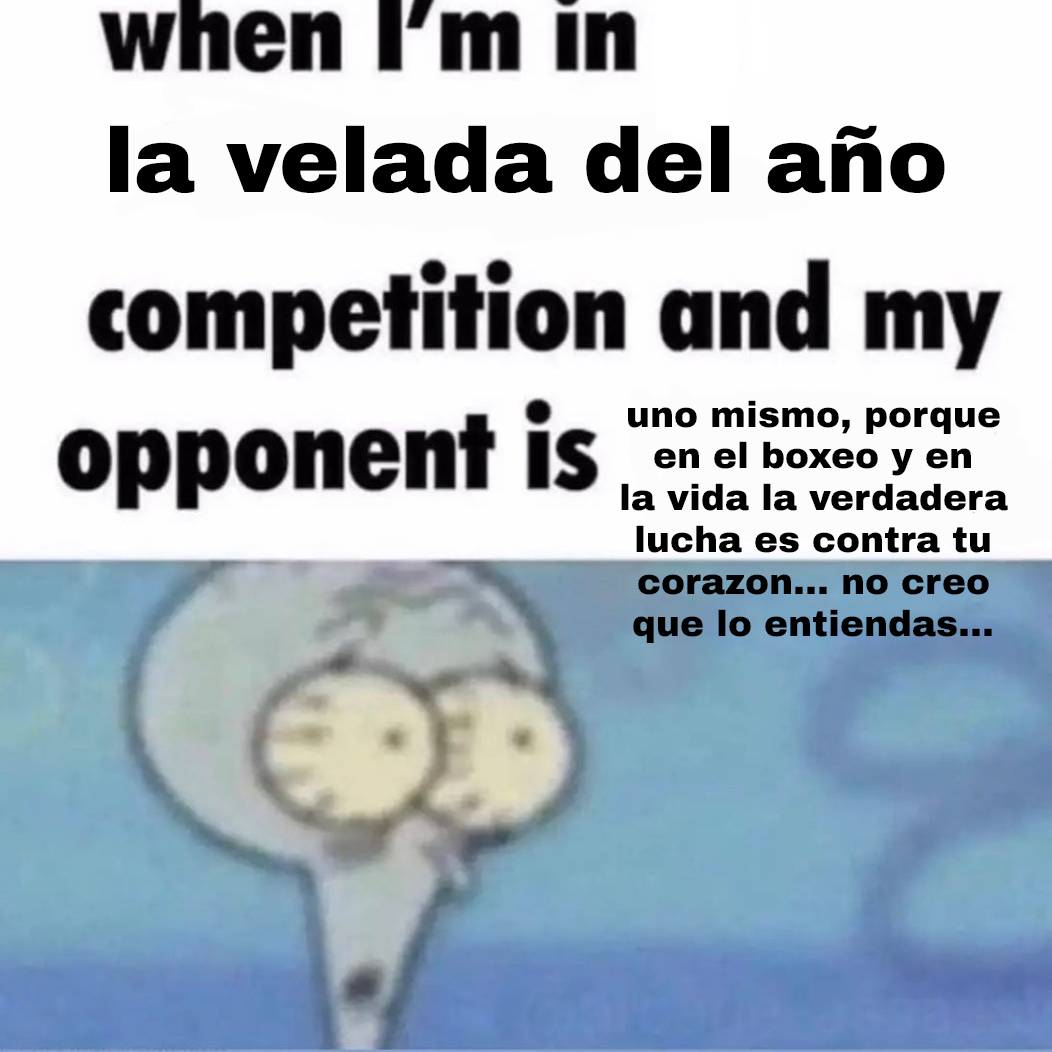
<style>
.page{position:relative;width:1052px;height:1052px;background:#fefefe}
.page>*{position:absolute;margin:0}
.t1{font:91.2px "ArchivoBlack-Regular";color:#000000}
.t2{font:36px "ArchivoBlack-Regular";color:#000000}
</style>
<div class="page">
<p class="t1" style="left:110px;top:125px;width:835px;height:69px">la velada del año</p>
<p class="t2" style="left:621px;top:400px;width:387px;height:243px;text-align:center">uno mismo, porque<br>en el boxeo y en<br>la vida la verdadera<br>lucha es contra tu<br>corazon... no creo<br>que lo entiendas...</p>
</div>
